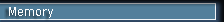
<style>
.page{position:relative;width:224px;height:22px;background:#527f9b}
.page>*{position:absolute;margin:0}
.t1{font:12.1px "Verdana";color:#ffffff;scale:0.91 1}
</style>
<div class="page">
<p class="t1" style="left:9px;top:7px;width:44px;height:11px">Memory</p>
</div>
